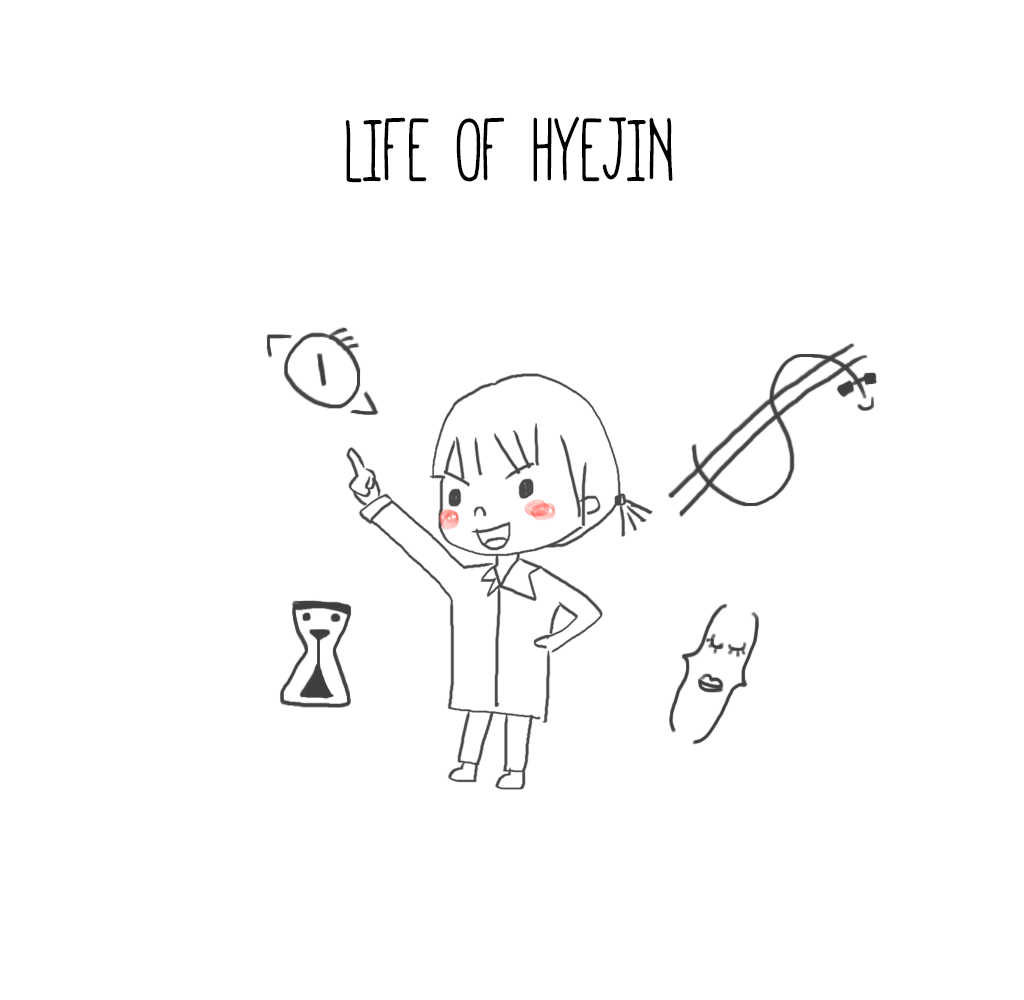
<style>
.page{position:relative;width:1024px;height:1000px;background:#ffffff}
.page>*{position:absolute;margin:0}
.t1{font:100px "Mathlete-Bulky";color:#000000;scale:0.9 1}
</style>
<div class="page">
<p class="t1" style="left:345px;top:116px;width:328px;height:67px">LIFE OF HYEJIN</p>
</div>
